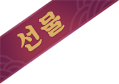
<style>
.page{position:relative;width:119px;height:84px;background:#ffffff}
.page>*{position:absolute;margin:0}
.t1{font:25.7px "SDKukdetopokki-bBd";letter-spacing:0.12em;color:#d8b163}
</style>
<div class="page">
<p class="t1" style="left:17px;top:11px;width:48px;height:41px;rotate:-35deg">선물</p>
</div>
